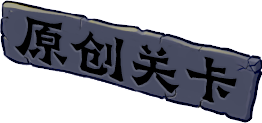
<style>
.page{position:relative;width:262px;height:123px;background:#ffffff}
.page>*{position:absolute;margin:0}
.t1{font:61.1px "GraveBustedStoneLishuSCRoughlyC";color:#000000;scale:1.06 1}
</style>
<div class="page">
<p class="t1" style="left:15px;top:16px;width:222px;height:87px;rotate:13deg">原创关卡</p>
</div>
